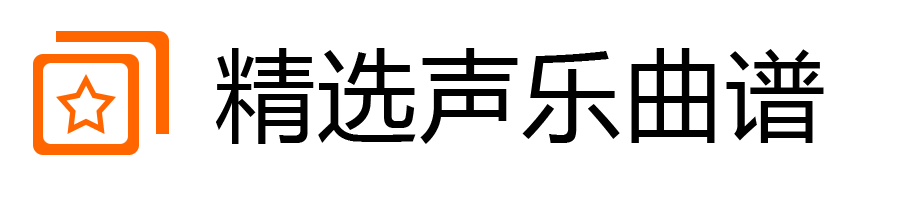
<style>
.page{position:relative;width:900px;height:200px;background:#ffffff}
.page>*{position:absolute;margin:0}
.t1{font:100px "MicrosoftYaHei";letter-spacing:0.02em;color:#000000}
</style>
<div class="page">
<p class="t1" style="left:216px;top:48px;width:608px;height:96px">精选声乐曲谱</p>
</div>
